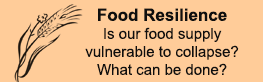
<style>
.page{position:relative;width:263px;height:82px;background:#ffcc99}
.page>*{position:absolute;margin:0}
.t1{font:15px/18px "ArialMT";color:#0f0f0f}
.t2{font:17px/20.4px "Arial-BoldMT";color:#0f0f0f}
</style>
<div class="page">
<p class="t1" style="left:85px;top:8px;width:154px;height:67px;text-align:center"><span class="t2">Food Resilience<br></span>Is our food supply<br>vulnerable to collapse?<br>What can be done?</p>
</div>
